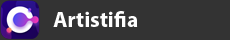
<style>
.page{position:relative;width:230px;height:40px;background:#333333}
.page>*{position:absolute;margin:0}
.t1{font:22px "MyriadPro-Bold";color:#fefefe}
</style>
<div class="page">
<p class="t1" style="left:53px;top:11px;width:85px;height:16px">Artistifia</p>
</div>
